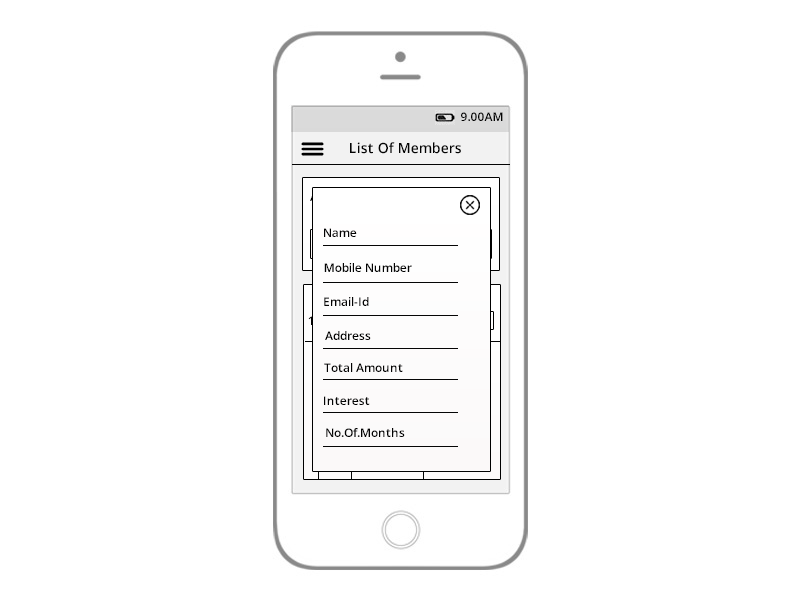
<style>
.page{position:relative;width:800px;height:600px;background:#ffffff}
.page>*{position:absolute;margin:0}
.t1{font:12px "OpenSans-Semibold";color:#030303}
.t2{font:14px "OpenSans-Semibold";color:#030303}
</style>
<div class="page">
<p class="t1" style="left:461px;top:112px;width:42px;height:9px">9.00AM</p>
<p class="t2" style="left:350px;top:142px;width:111px;height:12px">List Of Members</p>
<p class="t1" style="left:324px;top:228px;width:33px;height:9px">Name</p>
<p class="t1" style="left:324px;top:263px;width:88px;height:9px">Mobile Number</p>
<p class="t1" style="left:324px;top:297px;width:45px;height:9px">Email-Id</p>
<p class="t1" style="left:308px;top:316px;width:5px;height:9px">1</p>
<p class="t1" style="left:325px;top:331px;width:46px;height:9px">Address</p>
<p class="t1" style="left:324px;top:363px;width:79px;height:9px">Total Amount</p>
<p class="t1" style="left:324px;top:396px;width:46px;height:9px">Interest</p>
<p class="t1" style="left:326px;top:428px;width:79px;height:9px">No.Of.Months</p>
</div>
